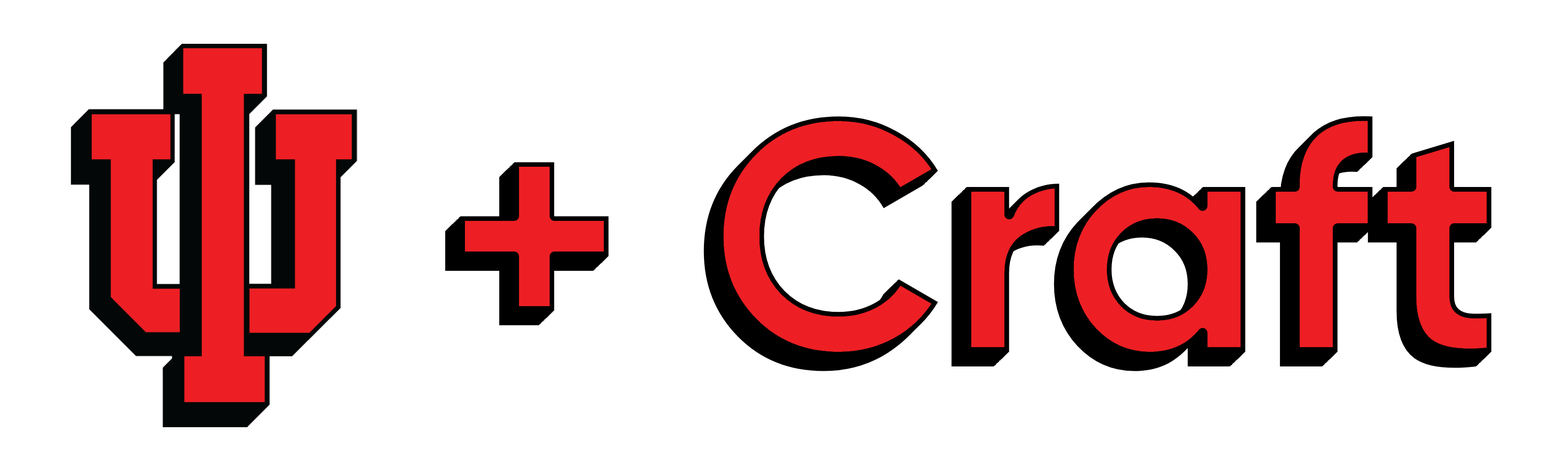
<style>
.page{position:relative;width:1568px;height:471px;background:#ffffff}
.page>*{position:absolute;margin:0}
.t1{font:329.4px "Gilroy-Bold";color:#ed1f24}
</style>
<div class="page">
<p class="t1" style="left:460px;top:114px;width:1032px;height:243px">+ Craft</p>
</div>
